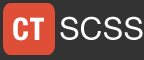
<style>
.page{position:relative;width:144px;height:60px;background:#333333}
.page>*{position:absolute;margin:0}
.t1{font:31px "HelveticaNeue-CondensedBold";letter-spacing:0.02em;color:#ffffff}
.t2{font:31px "HelveticaNeue";letter-spacing:0.02em;color:#ffffff}
</style>
<div class="page">
<p class="t1" style="left:13px;top:17px;width:31px;height:24px">CT</p>
<p class="t2" style="left:60px;top:16px;width:83px;height:24px">SCSS</p>
</div>
